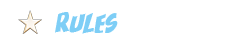
<style>
.page{position:relative;width:250px;height:45px;background:#ffffff}
.page>*{position:absolute;margin:0}
.t1{font:30px "HoustonComicsPersonalUse";color:#7ecef6}
</style>
<div class="page">
<p class="t1" style="left:55px;top:12px;width:63px;height:22px">RULES</p>
</div>
